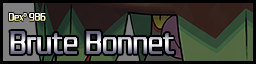
<style>
.page{position:relative;width:256px;height:64px;background:#000000}
.page>*{position:absolute;margin:0}
.t1{font:12px "ChaneyThinNormal"}
.t2{font:36px "ChaneyThinNormal"}
</style>
<div class="page">
<p class="t1" style="left:8px;top:13px;width:38px;height:8px">Dexº 986</p>
<p class="t2" style="left:10px;top:31px;width:165px;height:23px">Brute Bonnet</p>
</div>
